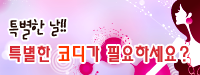
<style>
.page{position:relative;width:200px;height:75px}
.page>*{position:absolute;margin:0}
.t1{font:21.2px "SanKsM";letter-spacing:-0.1em;color:#200903;font-weight:bold;scale:0.91 1}
.t2{font:17px "YDIYheadL-KSCpc-EUC-H";letter-spacing:-0.1em;color:#d62931;font-weight:bold;scale:0.91 1}
.t3{font:17px "YDIYheadL-KSCpc-EUC-H";letter-spacing:-0.1em;color:#ff3500;font-weight:bold;scale:0.91 1}
</style>
<div class="page">
<p class="t1" style="left:9px;top:19px;width:58px;height:21px">특별한 날!!</p>
<p class="t2" style="left:9px;top:45px;width:180px;height:17px">특별한 <span class="t3">코디</span>가 필요하세요?</p>
</div>
